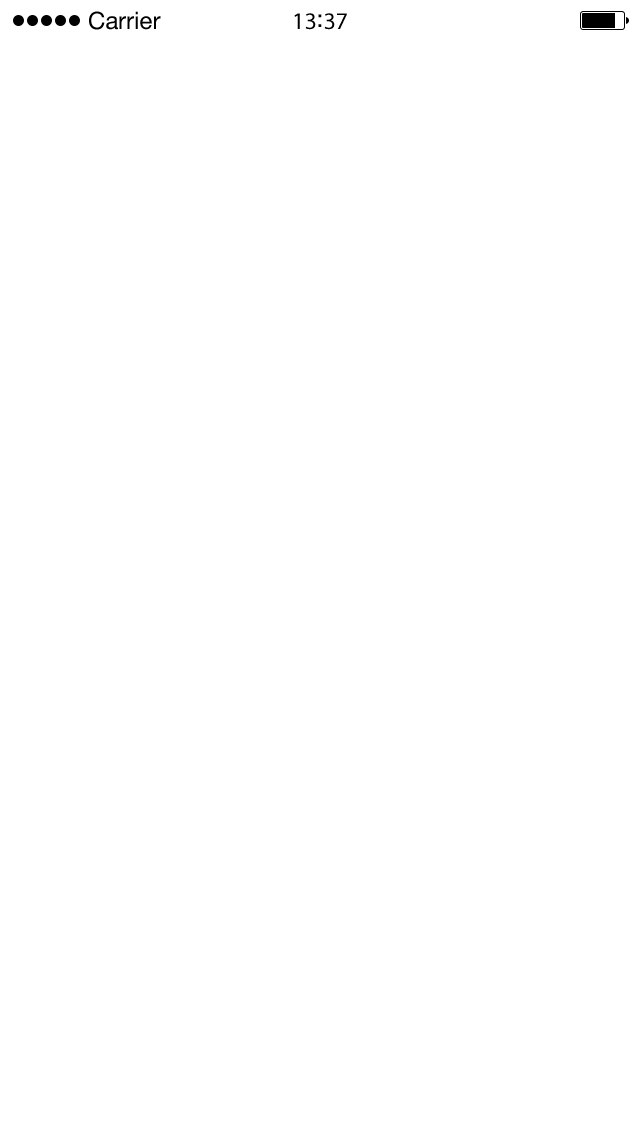
<style>
.page{position:relative;width:640px;height:1136px;background:#ffffff}
.page>*{position:absolute;margin:0}
.t1{font:24px "HelveticaNeue";color:#000000}
.t2{font:24px "MyriadPro-Regular";color:#000000}
</style>
<div class="page">
<p class="t1" style="left:89px;top:11px;width:72px;height:19px">Carrier</p>
<p class="t2" style="left:294px;top:13px;width:53px;height:17px">13<span class="t1">:</span>37</p>
</div>
